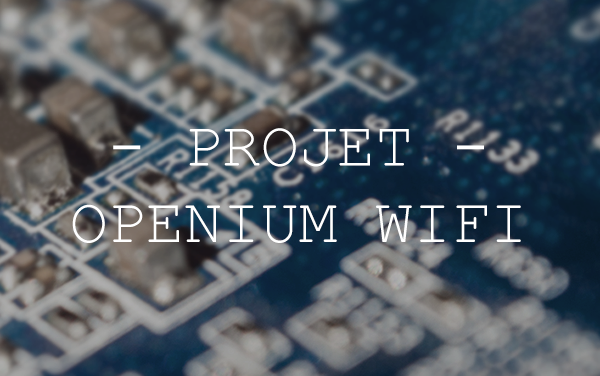
<style>
.page{position:relative;width:600px;height:376px}
.page>*{position:absolute;margin:0}
.t1{font:63.7px "CourierNewPSMT";color:#ffffff}
</style>
<div class="page">
<p class="t1" style="left:72px;top:128px;width:449px;height:115px;text-align:center">- PROJET -<br>OPENIUM WIFI</p>
</div>
